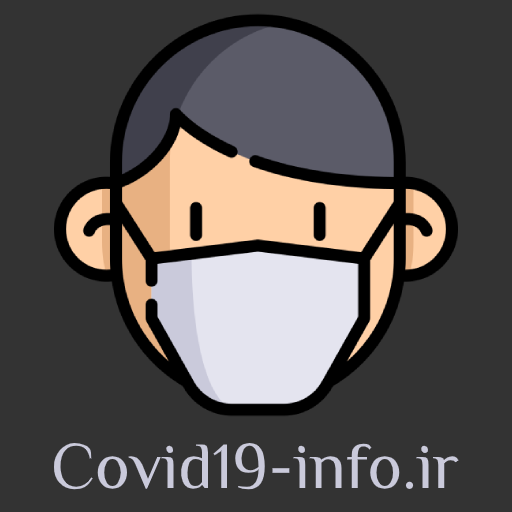
<style>
.page{position:relative;width:512px;height:512px;background:#333333}
.page>*{position:absolute;margin:0}
.t1{font:66px "ElMessiri-Regular";color:#cacadb}
</style>
<div class="page">
<p class="t1" style="left:53px;top:443px;width:406px;height:47px">Covid19-info.ir</p>
</div>
